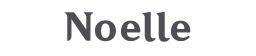
<style>
.page{position:relative;width:256px;height:56px;background:#ffffff}
.page>*{position:absolute;margin:0}
.t1{font:36px "HYWenHei-HEW";color:#4f4e57}
</style>
<div class="page">
<p class="t1" style="left:64px;top:11px;width:127px;height:31px">Noelle</p>
</div>
